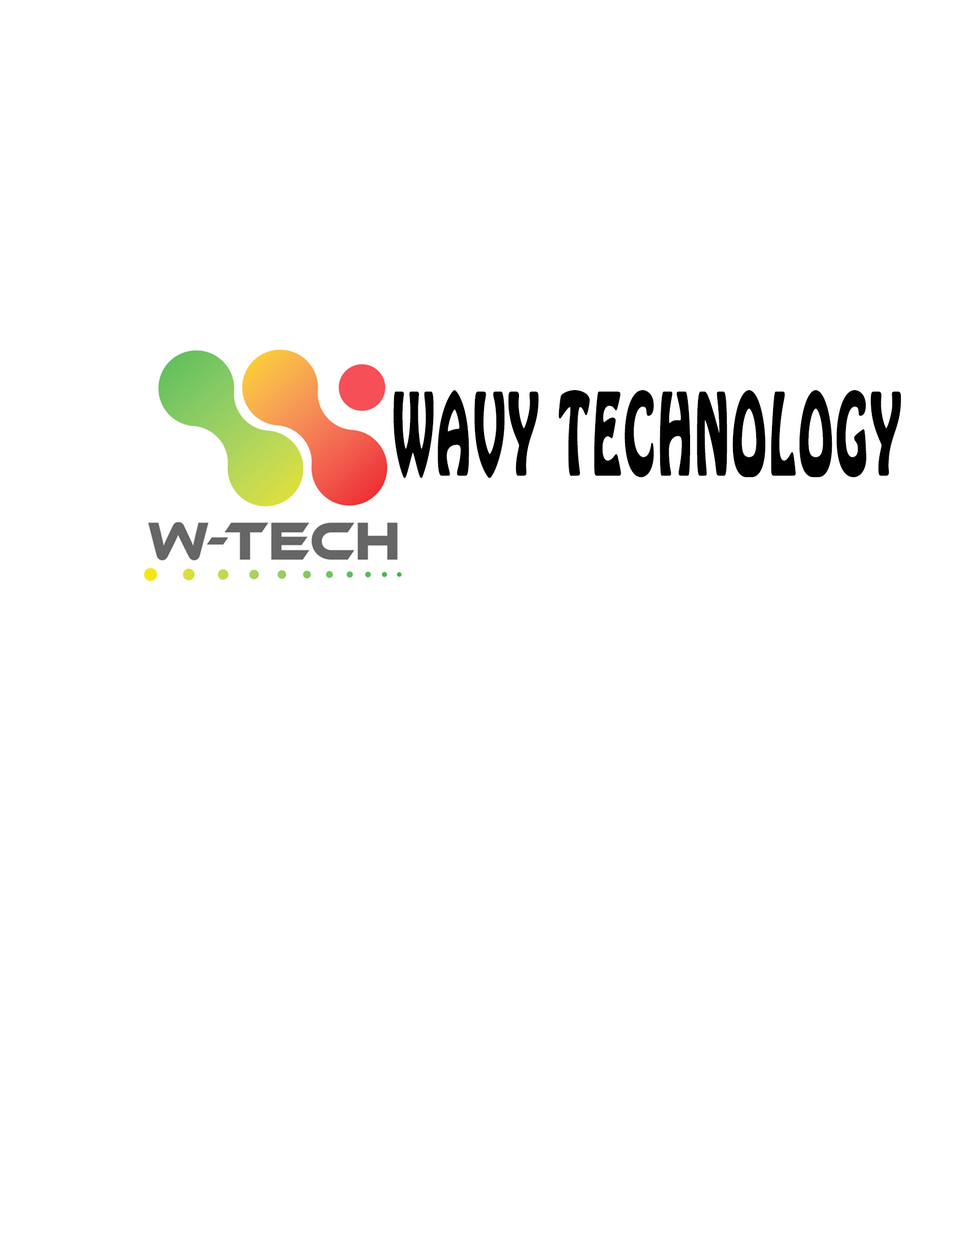
<style>
.page{position:relative;width:960px;height:1242px;background:#ffffff}
.page>*{position:absolute;margin:0}
.t1{font:98px "HoboStd";letter-spacing:0.05em;color:#000000;text-transform:uppercase;font-weight:bold;scale:0.48 1}
</style>
<div class="page">
<p class="t1" style="left:394px;top:390px;width:507px;height:88px">WAVY TECHNOLOGY</p>
</div>
